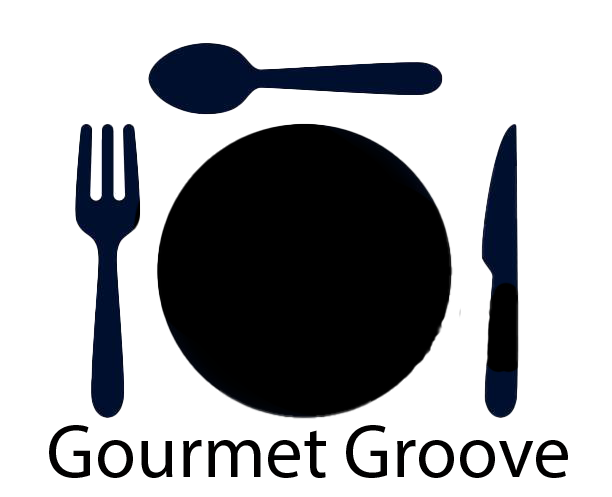
<style>
.page{position:relative;width:612px;height:497px;background:#ffffff}
.page>*{position:absolute;margin:0}
.t1{font:75px "MyriadPro-Regular";color:#010000}
</style>
<div class="page">
<p class="t1" style="left:49px;top:425px;width:519px;height:53px">Gourmet Groove</p>
</div>
